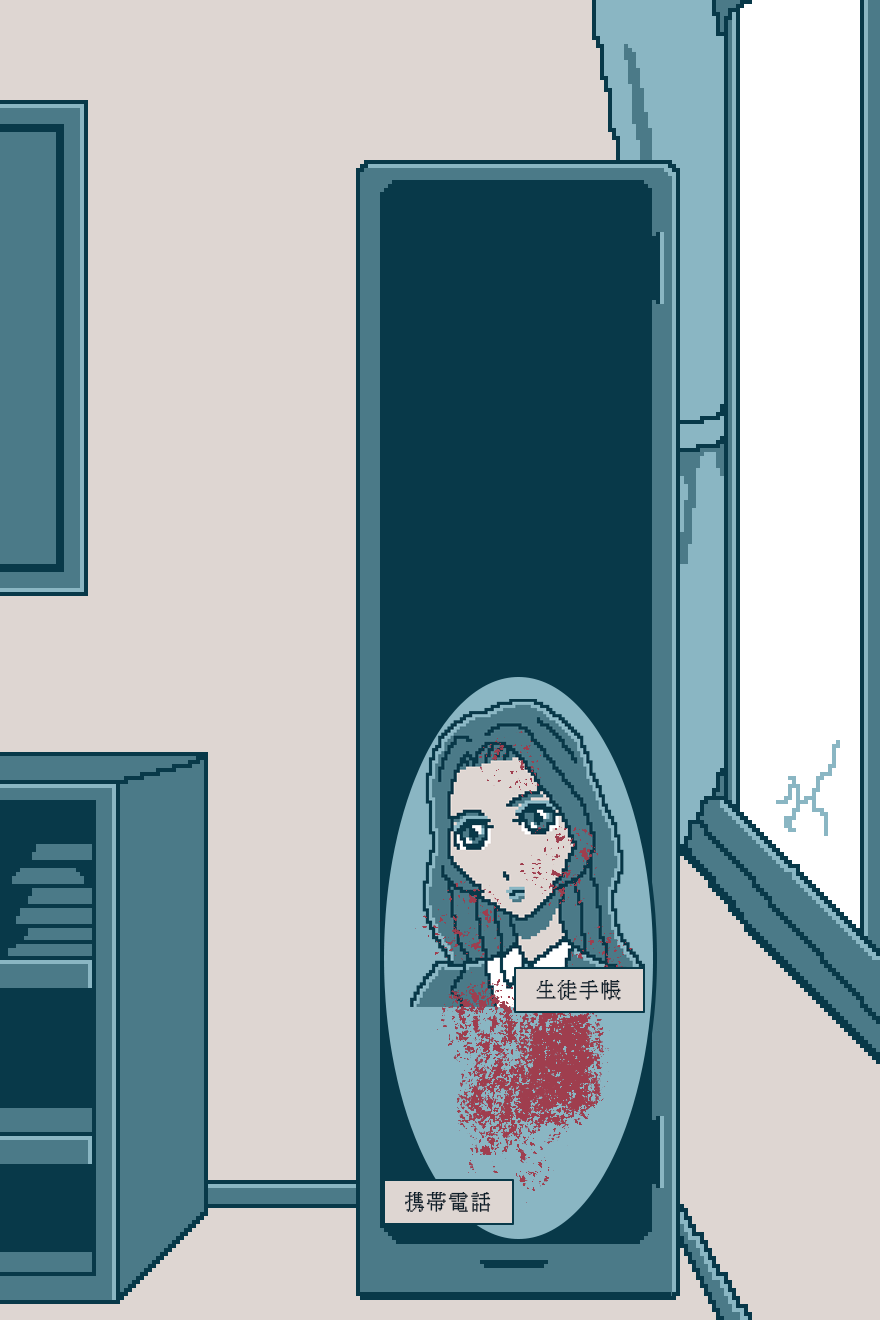
<style>
.page{position:relative;width:880px;height:1320px;background:#ded6d2}
.page>*{position:absolute;margin:0}
.t1{font:20px "KH-Dot-kagurazaka-16";letter-spacing:0.12em;color:#0a192d}
</style>
<div class="page">
<p class="t1" style="left:536px;top:980px;width:85px;height:20px">生徒手帳</p>
<p class="t1" style="left:405px;top:1192px;width:86px;height:20px">携帯電話</p>
</div>
